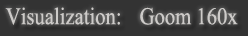
<style>
.page{position:relative;width:248px;height:36px;background:#333333}
.page>*{position:absolute;margin:0}
.t1{font:24px "TimesNewRomanPSMT";color:#cdcbc9;scale:0.86 1}
</style>
<div class="page">
<p class="t1" style="left:5px;top:7px;width:115px;height:18px">Visualization:</p>
<p class="t1" style="left:140px;top:7px;width:98px;height:18px">Goom 160x</p>
</div>
